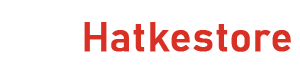
<style>
.page{position:relative;width:300px;height:74px;background:#ffffff}
.page>*{position:absolute;margin:0}
.t1{font:70px "Bahnschrift";color:#d93025;font-weight:bold}
.t2{font:70px "Bahnschrift";color:#ffffff;font-weight:bold}
</style>
<div class="page">
<p class="t1" style="left:12px;top:22px;width:279px;height:30px"><span class="t2">The</span>Hatkestore</p>
</div>
